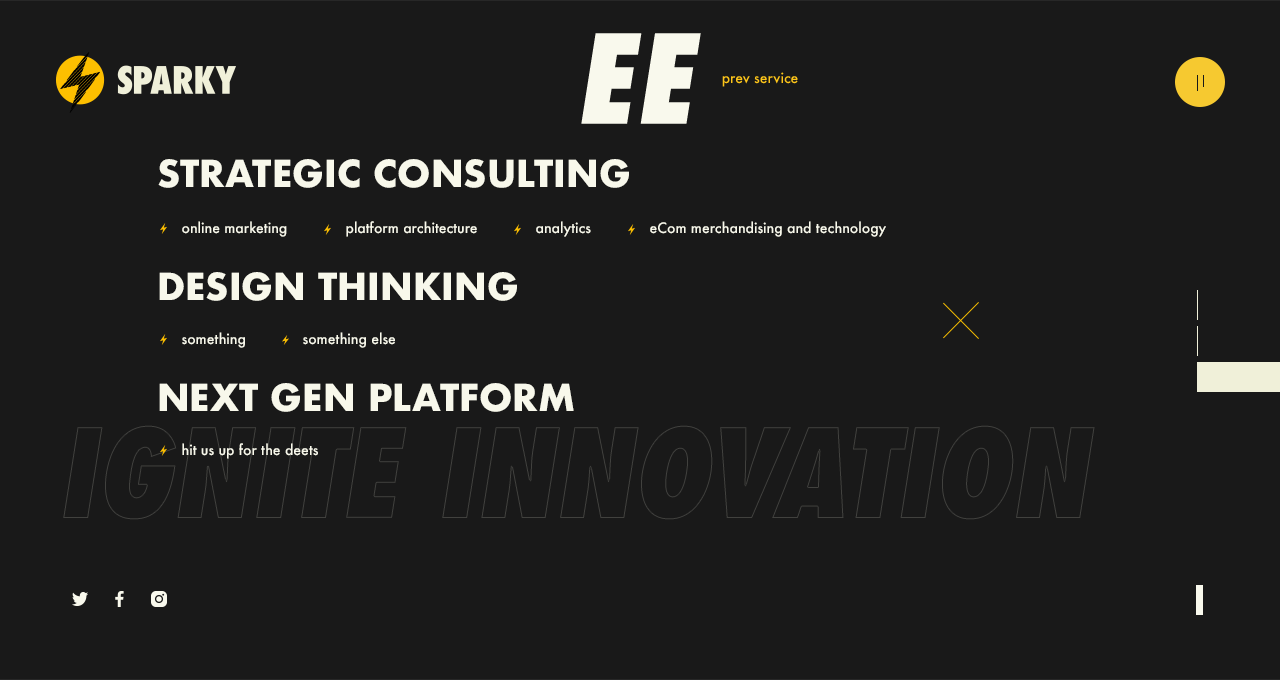
<style>
.page{position:relative;width:1280px;height:680px;background:#191919}
.page>*{position:absolute;margin:0}
.t1{font:120px "Futura-CondExtraBoldObl";color:#f8f8eb;text-transform:uppercase}
.t2{font:14px "Futura-Medium";color:#fdc519}
.t3{font:36px "Futura-Bold";color:#f8f8eb}
.t4{font:14px "Futura-Medium";color:#f8f8eb}
</style>
<div class="page">
<p class="t1" style="left:581px;top:33px;width:120px;height:91px">ee</p>
<p class="t2" style="left:722px;top:72px;width:76px;height:15px">prev service</p>
<p class="t3" style="left:158px;top:159px;width:471px;height:29px">STRATEGIC CONSULTING</p>
<p class="t4" style="left:182px;top:221px;width:105px;height:16px">online marketing</p>
<p class="t4" style="left:346px;top:221px;width:131px;height:16px">platform architecture</p>
<p class="t4" style="left:536px;top:221px;width:55px;height:16px">analytics</p>
<p class="t4" style="left:650px;top:221px;width:236px;height:16px">eCom merchandising and technology</p>
<p class="t3" style="left:159px;top:272px;width:358px;height:29px">DESIGN THINKING</p>
<p class="t4" style="left:182px;top:332px;width:63px;height:16px">something</p>
<p class="t4" style="left:303px;top:332px;width:92px;height:16px">something else</p>
<p class="t3" style="left:159px;top:383px;width:415px;height:29px">NEXT GEN PLATFORM</p>
<p class="t4" style="left:182px;top:443px;width:136px;height:16px">hit us up for the deets</p>
</div>
